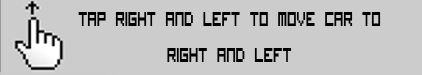
<style>
.page{position:relative;width:422px;height:75px;background:#cccccc}
.page>*{position:absolute;margin:0}
.t1{font:27px "VisitorTT1-BRK-";color:#000000;scale:0.58 1}
</style>
<div class="page">
<p class="t1" style="left:78px;top:12px;width:303px;height:50px;text-align:center">Tap right and left to move car to<br>right and left</p>
</div>
